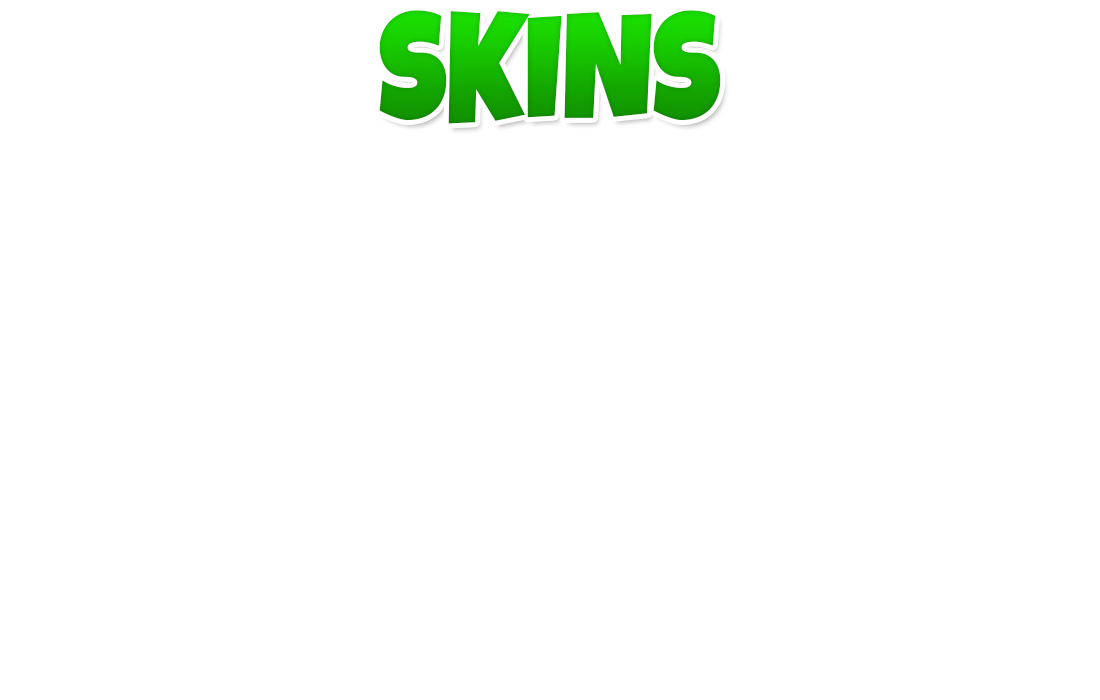
<style>
.page{position:relative;width:1100px;height:700px;background:#ffffff}
.page>*{position:absolute;margin:0}
.t1{font:149.5px "LuckiestGuy-Regular";letter-spacing:-0.01em;text-transform:uppercase;scale:0.87 1}
</style>
<div class="page">
<p class="t1" style="left:379px;top:10px;width:342px;height:114px">Skins</p>
</div>
